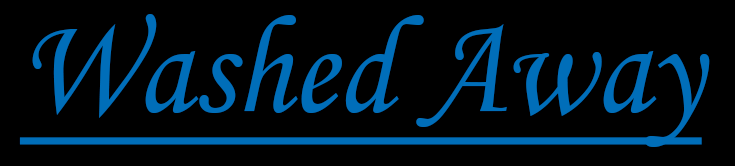
<style>
.page{position:relative;width:735px;height:166px;background:#000000}
.page>*{position:absolute;margin:0}
.t1{font:140.1px "MonotypeCorsiva";color:#006eb9;text-decoration:underline;scale:0.94 1}
</style>
<div class="page">
<p class="t1" style="left:19px;top:14px;width:691px;height:133px">Washed Away</p>
</div>
